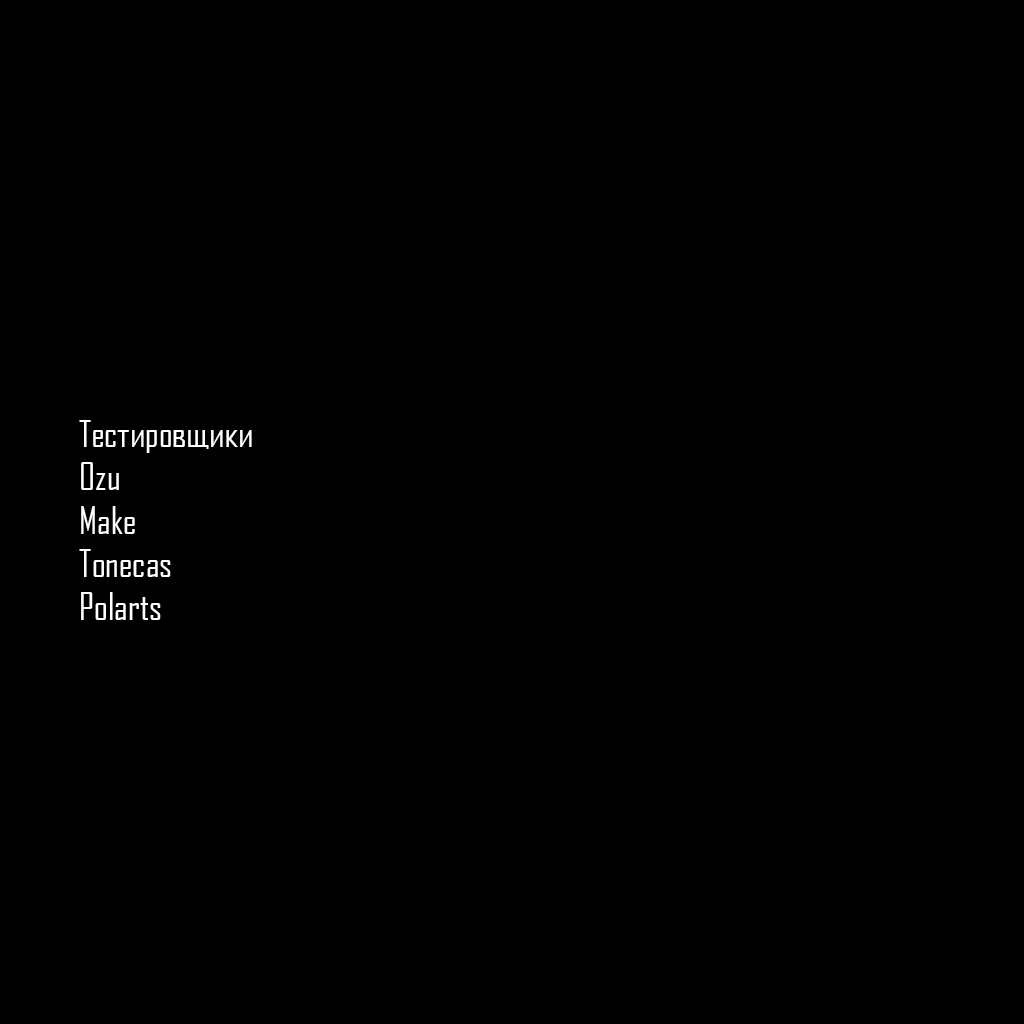
<style>
.page{position:relative;width:1024px;height:1024px;background:#000000}
.page>*{position:absolute;margin:0}
.t1{font:36px "AgencyFBCyrillic";color:#ffffff}
</style>
<div class="page">
<p class="t1" style="left:79px;top:420px;width:173px;height:200px">Тестировщики<br>Ozu<br>Make<br>Tonecas<br>Polarts</p>
</div>
